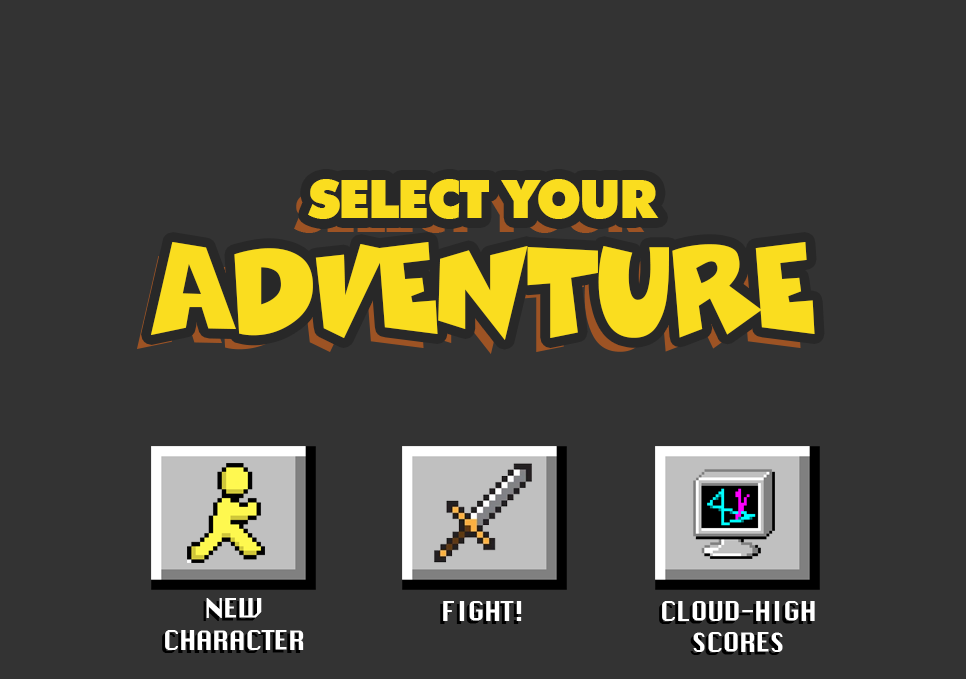
<style>
.page{position:relative;width:966px;height:679px;background:#333333}
.page>*{position:absolute;margin:0}
.t1{font:53.7px "FuturaBT-ExtraBlack";letter-spacing:-0.04em;color:#fadd1f}
.t2{font:120.5px "ComicsCarToon";letter-spacing:-0.04em;color:#fadd1f}
.t3{font:26.3px "ChicagoFLF";letter-spacing:-0.04em;color:#ffffff}
</style>
<div class="page">
<p class="t1" style="left:308px;top:179px;width:351px;height:40px">SELECT YOUR</p>
<p class="t2" style="left:151px;top:242px;width:664px;height:98px">ADVENTURE</p>
<p class="t3" style="left:165px;top:598px;width:139px;height:52px;text-align:center">NEW<br>CHARACTER</p>
<p class="t3" style="left:443px;top:601px;width:79px;height:20px">FIGHT!</p>
<p class="t3" style="left:662px;top:601px;width:153px;height:51px;text-align:center">CLOUD-HIGH<br>SCORES</p>
</div>
